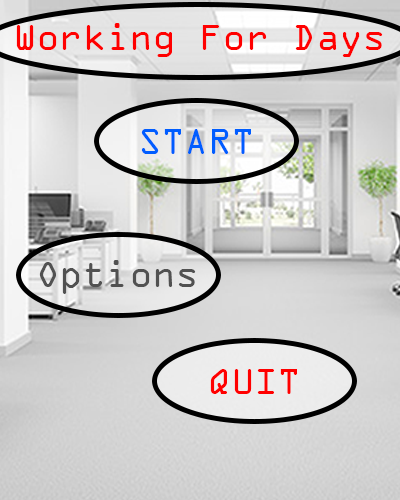
<style>
.page{position:relative;width:400px;height:500px}
.page>*{position:absolute;margin:0}
.t1{font:38.6px "OCRAExtended";color:#ff0000}
.t2{font:38.6px "OCRAExtended";color:#005dff}
.t3{font:38.6px "OCRAExtended";color:#515151}
</style>
<div class="page">
<p class="t1" style="left:16px;top:23px;width:367px;height:34px">Working For Days</p>
<p class="t2" style="left:141px;top:129px;width:110px;height:25px">START</p>
<p class="t3" style="left:39px;top:260px;width:157px;height:34px">Options</p>
<p class="t1" style="left:210px;top:369px;width:87px;height:25px">QUIT</p>
</div>
